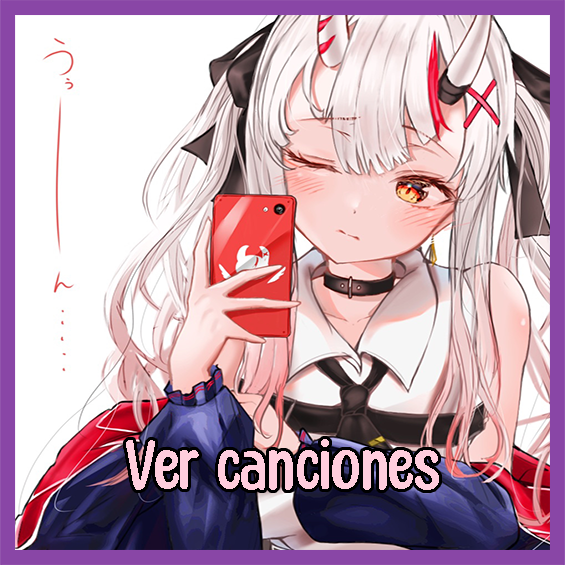
<style>
.page{position:relative;width:565px;height:565px}
.page>*{position:absolute;margin:0}
.t1{font:77.7px "HoneyNotes-Regular";color:#ffcddd}
</style>
<div class="page">
<p class="t1" style="left:126px;top:439px;width:313px;height:51px">Ver canciones</p>
</div>
